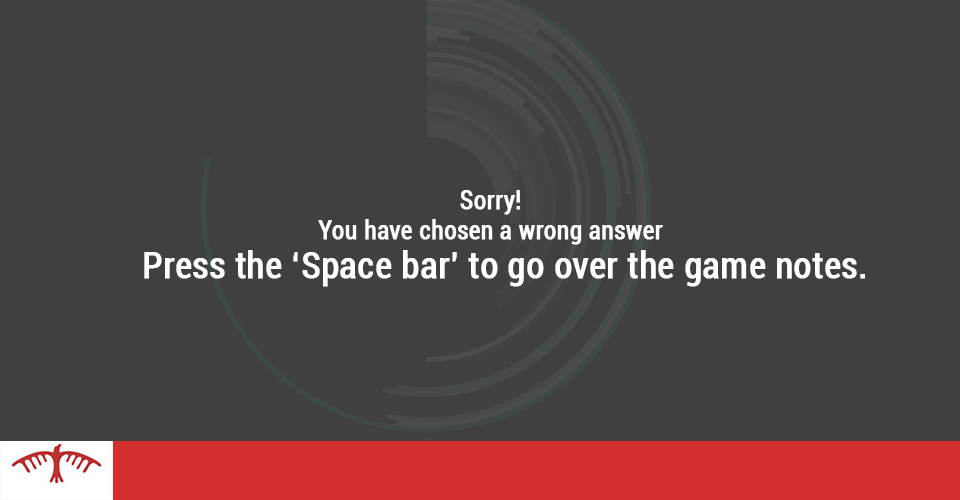
<style>
.page{position:relative;width:960px;height:500px;background:#404042}
.page>*{position:absolute;margin:0}
.t1{font:25px "Roboto-Condensed";color:#ffffff;font-weight:bold}
.t2{font:36px "Roboto-Condensed";color:#ffffff;font-weight:bold}
</style>
<div class="page">
<p class="t1" style="left:318px;top:190px;width:345px;height:55px;text-align:center">Sorry!<br>You have chosen a wrong answer</p>
<p class="t2" style="left:144px;top:250px;width:721px;height:37px">Press the ‘Space bar’ to go over the game notes.</p>
</div>
